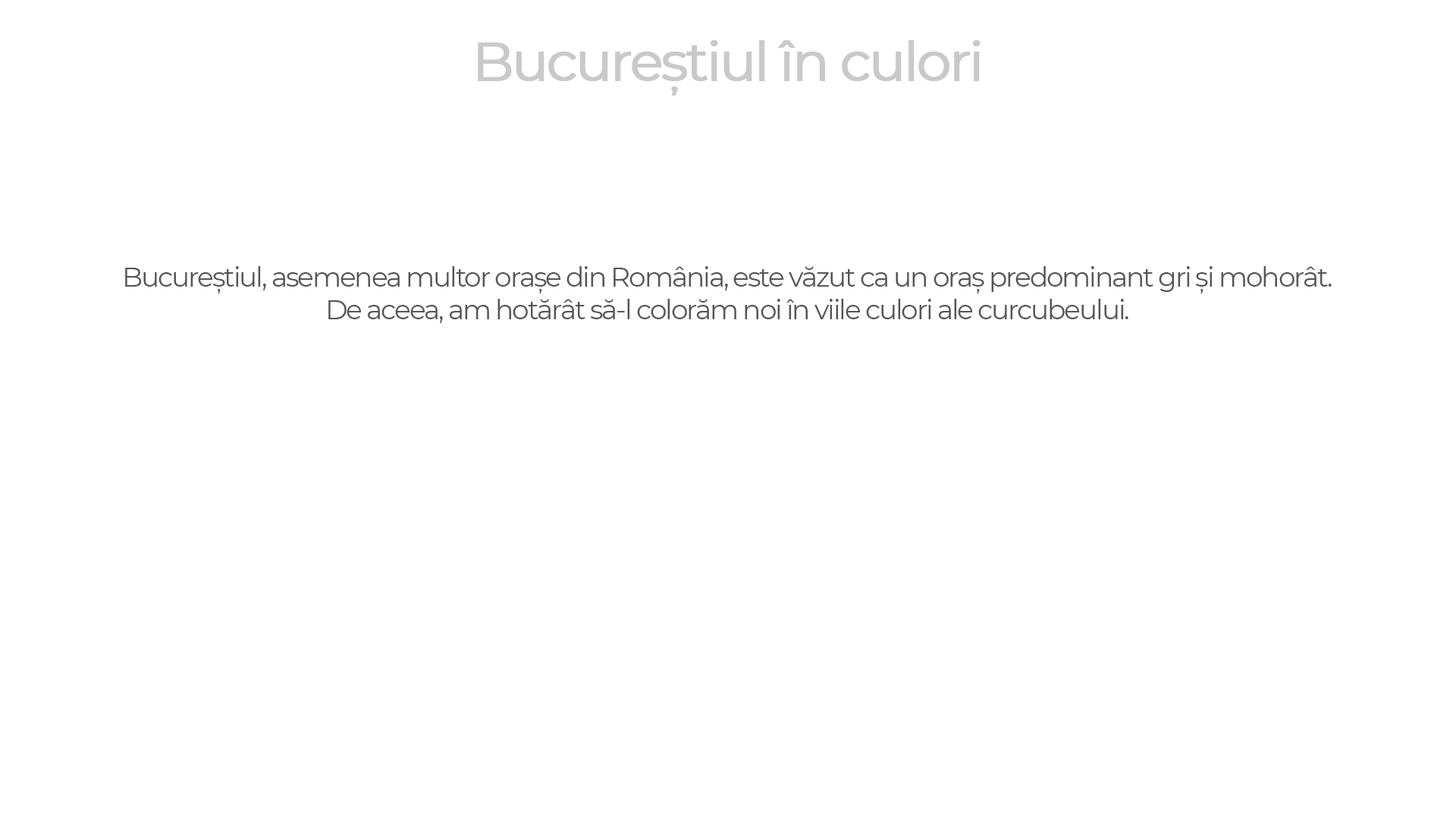
<style>
.page{position:relative;width:1456px;height:819px;background:#ffffff}
.page>*{position:absolute;margin:0}
.t1{font:54.6px "Montserrat-Regular";letter-spacing:-0.06em;color:#c9c9c9;font-weight:bold}
.t2{font:27.3px "Montserrat-Regular";letter-spacing:-0.06em;color:#555555}
</style>
<div class="page">
<p class="t1" style="left:478px;top:40px;width:503px;height:56px">Bucureștiul în culori</p>
<p class="t2" style="left:125px;top:266px;width:1207px;height:57px;text-align:center">Bucureștiul, asemenea multor orașe din România, este văzut ca un oraș predominant gri și mohorât.<br>De aceea, am hotărât să-l colorăm noi în viile culori ale curcubeului.</p>
</div>
